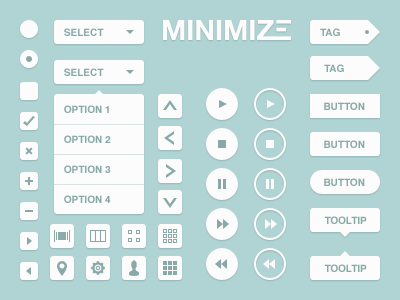
<style>
.page{position:relative;width:400px;height:300px;background:#b0d3d4}
.page>*{position:absolute;margin:0}
.t1{font:10px "Helvetica-Bold";color:#89a8a8;text-transform:uppercase}
</style>
<div class="page">
<p class="t1" style="left:64px;top:28px;width:40px;height:8px">SELECT</p>
<p class="t1" style="left:320px;top:28px;width:20px;height:8px">TAG</p>
<p class="t1" style="left:324px;top:64px;width:20px;height:8px">TAG</p>
<p class="t1" style="left:64px;top:68px;width:40px;height:8px">SELECT</p>
<p class="t1" style="left:324px;top:102px;width:41px;height:8px">BUTTON</p>
<p class="t1" style="left:64px;top:105px;width:45px;height:8px">OPTION 1</p>
<p class="t1" style="left:64px;top:135px;width:47px;height:8px">OPTION 2</p>
<p class="t1" style="left:324px;top:140px;width:41px;height:8px">BUTTON</p>
<p class="t1" style="left:64px;top:165px;width:47px;height:8px">OPTION 3</p>
<p class="t1" style="left:324px;top:178px;width:41px;height:8px">BUTTON</p>
<p class="t1" style="left:64px;top:195px;width:47px;height:8px">OPTION 4</p>
<p class="t1" style="left:324px;top:216px;width:43px;height:8px">tooltip</p>
<p class="t1" style="left:324px;top:264px;width:43px;height:8px">tooltip</p>
</div>
